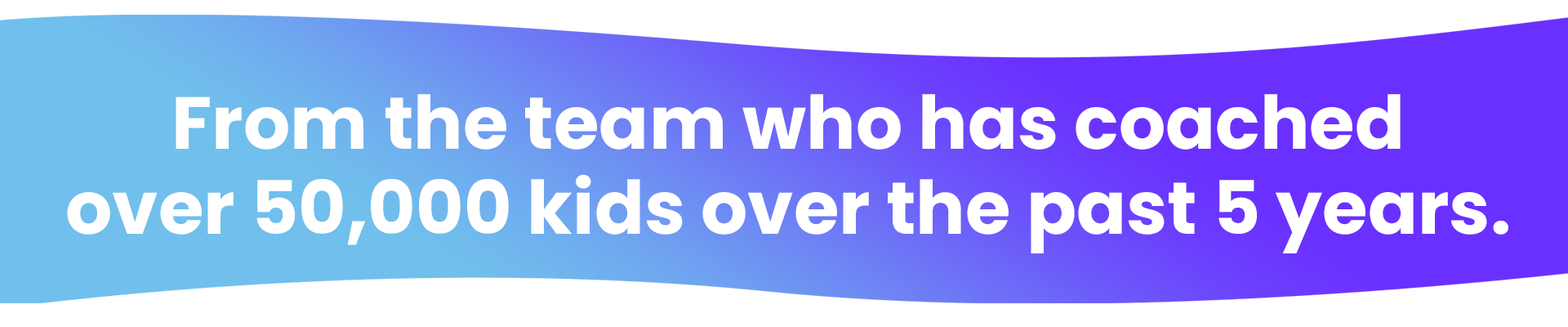
<style>
.page{position:relative;width:1568px;height:327px;background:#ffffff}
.page>*{position:absolute;margin:0}
.t1{font:73.6px/85.4px "Poppins-Bold";color:#ffffff}
</style>
<div class="page">
<p class="t1" style="left:67px;top:94px;width:1441px;height:159px;text-align:center">From the team who has coached <br>over 50,000 kids over the past 5 years.</p>
</div>
